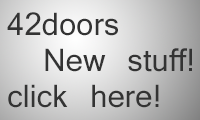
<style>
.page{position:relative;width:200px;height:120px}
.page>*{position:absolute;margin:0}
.t1{font:30px "Kartika";color:#333333}
</style>
<div class="page">
<p class="t1" style="left:7px;top:12px;width:185px;height:96px">42doors<br> New stuff!<br>click here!</p>
</div>
